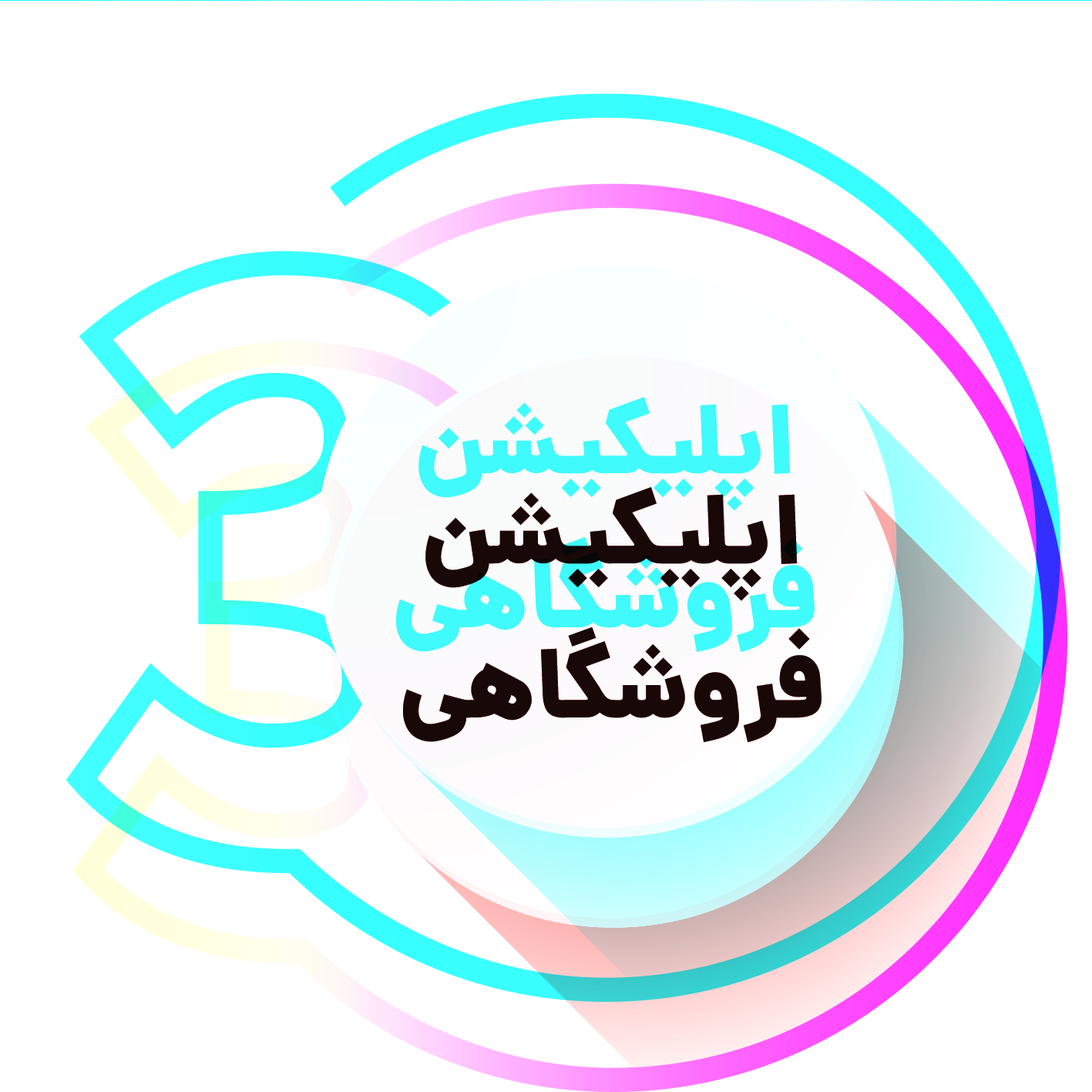
<style>
.page{position:relative;width:1092px;height:1092px;background:#ffffff}
.page>*{position:absolute;margin:0}
.t1{font:96.3px/154.1px "Dana-Black";color:#40fbfb}
</style>
<div class="page">
<p class="t1" style="left:396px;top:396px;width:419px;height:256px;text-align:center">اپلیکیشن فروشگاهی</p>
</div>
